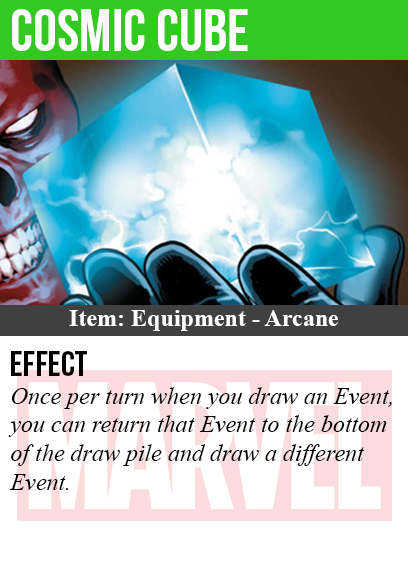
<style>
.page{position:relative;width:408px;height:585px;background:#ffffff}
.page>*{position:absolute;margin:0}
.t1{font:60px "BebasNeue";color:#ffffff}
.t2{font:24px "TimesNewRomanPS-BoldMT";color:#ffffff}
.t3{font:36px "BebasNeue";color:#000000}
.t4{font:24px "TimesNewRomanPS-ItalicMT";color:#000000}
</style>
<div class="page">
<p class="t1" style="left:12px;top:9px;width:236px;height:42px">cosmic cube</p>
<p class="t2" style="left:69px;top:310px;width:269px;height:21px">Item: Equipment - Arcane</p>
<p class="t3" style="left:11px;top:351px;width:76px;height:25px">Effect</p>
<p class="t4" style="left:8px;top:387px;width:384px;height:103px">Once per turn when you draw an Event,<br>you can return that Event to the bottom<br>of the draw pile and draw a different<br>Event.</p>
</div>
